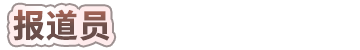
<style>
.page{position:relative;width:360px;height:50px;background:#ffffff}
.page>*{position:absolute;margin:0}
.t1{font:32px "SourceHanSansSC-Bold";font-weight:bold}
</style>
<div class="page">
<p class="t1" style="left:13px;top:9px;width:97px;height:32px">报道员</p>
</div>
